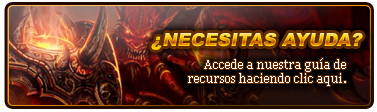
<style>
.page{position:relative;width:377px;height:112px}
.page>*{position:absolute;margin:0}
.t1{font:18px "Arial-Black";font-style:italic}
.t2{font:12px "Georgia";color:#ffffff}
</style>
<div class="page">
<p class="t1" style="left:151px;top:33px;width:212px;height:17px">¿NECESITAS AYUDA?</p>
<p class="t2" style="left:188px;top:58px;width:158px;height:28px;text-align:right">Accede a nuestra guía de<br>recursos haciendo clic aqui.</p>
</div>
